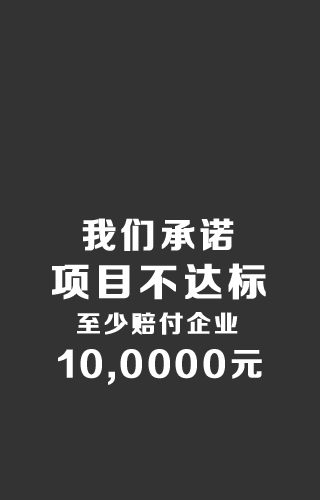
<style>
.page{position:relative;width:320px;height:500px;background:#333333}
.page>*{position:absolute;margin:0}
.t1{font:35.1px "FZZCHJW--GB1-0";letter-spacing:0.1em;color:#ffffff;text-transform:uppercase;font-weight:bold}
.t2{font:39.2px "FZZCHJW--GB1-0";letter-spacing:0.1em;color:#ffffff;text-transform:uppercase;font-weight:bold}
.t3{font:24.4px "FZZCHJW--GB1-0";letter-spacing:0.1em;color:#ffffff;text-transform:uppercase;font-weight:bold}
.t4{font:32.6px "FZZCHJW--GB1-0";letter-spacing:0.1em;color:#ffffff;text-transform:uppercase;font-weight:bold}
</style>
<div class="page">
<p class="t1" style="left:82px;top:218px;width:152px;height:33px">我们承诺</p>
<p class="t2" style="left:52px;top:263px;width:214px;height:37px">项目不达标</p>
<p class="t3" style="left:77px;top:312px;width:161px;height:23px">至少赔付企业</p>
<p class="t4" style="left:58px;top:349px;width:204px;height:36px">10,0000元</p>
</div>
